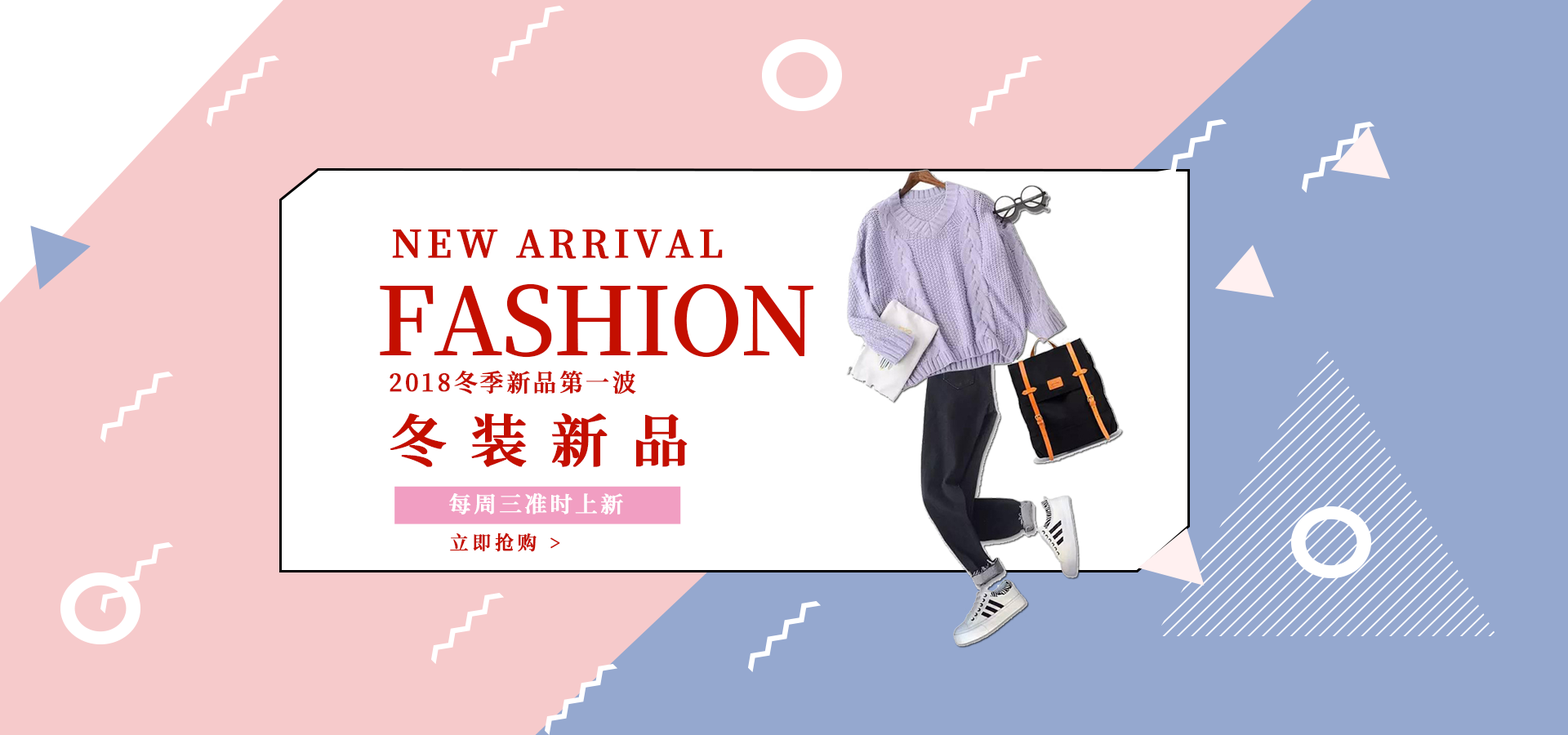
<style>
.page{position:relative;width:1568px;height:735px;background:#f6cacb}
.page>*{position:absolute;margin:0}
.t1{font:37.5px "SourceHanSerifSC-SemiBold";letter-spacing:0.1em;color:#c40f00;font-weight:bold}
.t2{font:93.7px "SourceHanSerifSC-SemiBold";letter-spacing:-0.05em;color:#c40f00;font-weight:bold}
.t3{font:24.2px "SourceHanSerifSC-SemiBold";letter-spacing:0.1em;color:#c40f00;font-weight:bold;scale:0.97 1}
.t4{font:56.8px "SourceHanSerifSC-SemiBold";letter-spacing:0.4em;color:#c40f00;font-weight:bold}
.t5{font:22.1px "SourceHanSerifSC-SemiBold";letter-spacing:0.1em;color:#ffffff;font-weight:bold}
.t6{font:18.9px "SourceHanSerifSC-SemiBold";letter-spacing:0.2em;color:#c40f00;font-weight:bold}
</style>
<div class="page">
<p class="t1" style="left:392px;top:229px;width:331px;height:30px">NEW ARRIVAL</p>
<p class="t2" style="left:380px;top:283px;width:433px;height:75px">FASHION</p>
<p class="t3" style="left:390px;top:370px;width:246px;height:24px">2018冬季新品第一波</p>
<p class="t4" style="left:390px;top:413px;width:298px;height:54px">冬装新品</p>
<p class="t5" style="left:449px;top:492px;width:174px;height:22px">每周三准时上新</p>
<p class="t6" style="left:450px;top:532px;width:110px;height:20px">立即抢购 &gt;</p>
</div>
